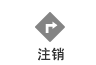
<style>
.page{position:relative;width:96px;height:65px;background:#ffffff}
.page>*{position:absolute;margin:0}
.t1{font:14px "SimHei";color:#333333}
</style>
<div class="page">
<p class="t1" style="left:38px;top:47px;width:26px;height:14px">注销</p>
</div>
